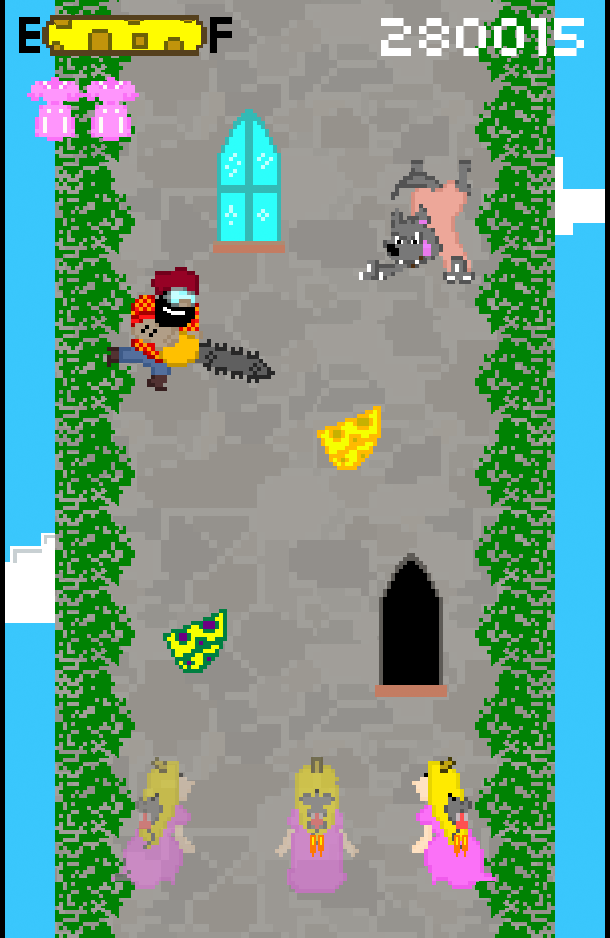
<style>
.page{position:relative;width:610px;height:938px}
.page>*{position:absolute;margin:0}
.t1{font:60px "04b03";color:#ffffff}
</style>
<div class="page">
<p class="t1" style="left:381px;top:18px;width:203px;height:38px">280015</p>
</div>
